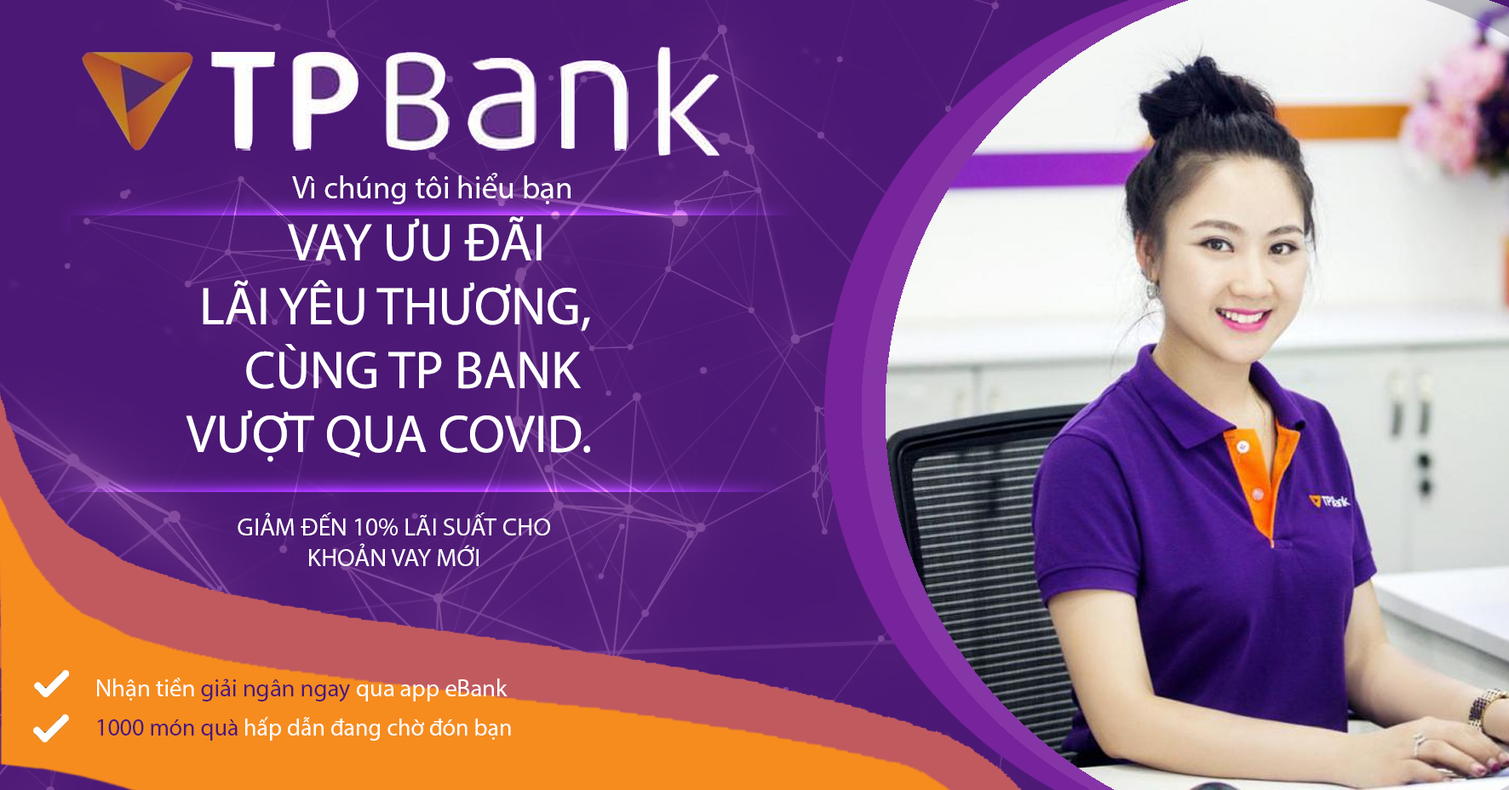
<style>
.page{position:relative;width:1509px;height:790px}
.page>*{position:absolute;margin:0}
.t1{font:31.7px "MyriadPro-Regular";color:#ffffff}
.t2{font:53.3px "MyriadPro-Regular";color:#ffffff}
.t3{font:25.3px "MyriadPro-Regular";color:#ffffff}
.t4{font:24.4px "MyriadPro-Regular";color:#4b1875}
.t5{font:24.4px "MyriadPro-Regular";color:#ffffff}
.t6{font:23.8px "MyriadPro-Regular";color:#ffffff}
.t7{font:23.8px "MyriadPro-Regular";color:#4b1875}
</style>
<div class="page">
<p class="t1" style="left:292px;top:173px;width:279px;height:31px">Vì chúng tôi hiểu bạn</p>
<p class="t2" style="left:186px;top:216px;width:404px;height:246px">VAY ƯU ĐÃI<br>    LÃI YÊU THƯƠNG,<br>        CÙNG TP BANK<br>   VƯỢT QUA COVID.</p>
<p class="t3" style="left:238px;top:513px;width:312px;height:53px">GIẢM ĐẾN 10% LÃI SUẤT CHO <br>             KHOẢN VAY MỚI</p>
<p class="t4" style="left:97px;top:678px;width:411px;height:25px"><span class="t5">Nhận tiền </span>giải ngân ngay <span class="t5">qua app eBank</span></p>
<p class="t6" style="left:97px;top:717px;width:414px;height:24px"><span class="t7">1000 món quà </span>hấp dẫn đang chờ đón bạn</p>
</div>
